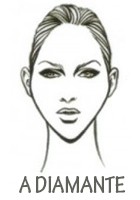
<style>
.page{position:relative;width:140px;height:200px;background:#ffffff}
.page>*{position:absolute;margin:0}
.t1{font:25px "TektonPro-BoldCond";color:#606159}
</style>
<div class="page">
<p class="t1" style="left:19px;top:176px;width:107px;height:17px">A DIAMANTE</p>
</div>
